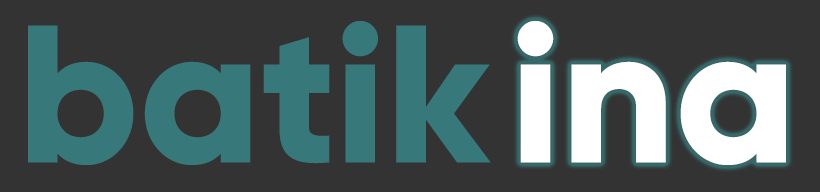
<style>
.page{position:relative;width:820px;height:192px;background:#333333}
.page>*{position:absolute;margin:0}
.t1{font:195.1px "Gilroy-ExtraBold";color:#37797b}
.t2{font:195.1px "Gilroy-ExtraBold";color:#ffffff}
</style>
<div class="page">
<p class="t1" style="left:28px;top:20px;width:463px;height:145px">batik</p>
<p class="t2" style="left:517px;top:20px;width:269px;height:145px">ina</p>
</div>
